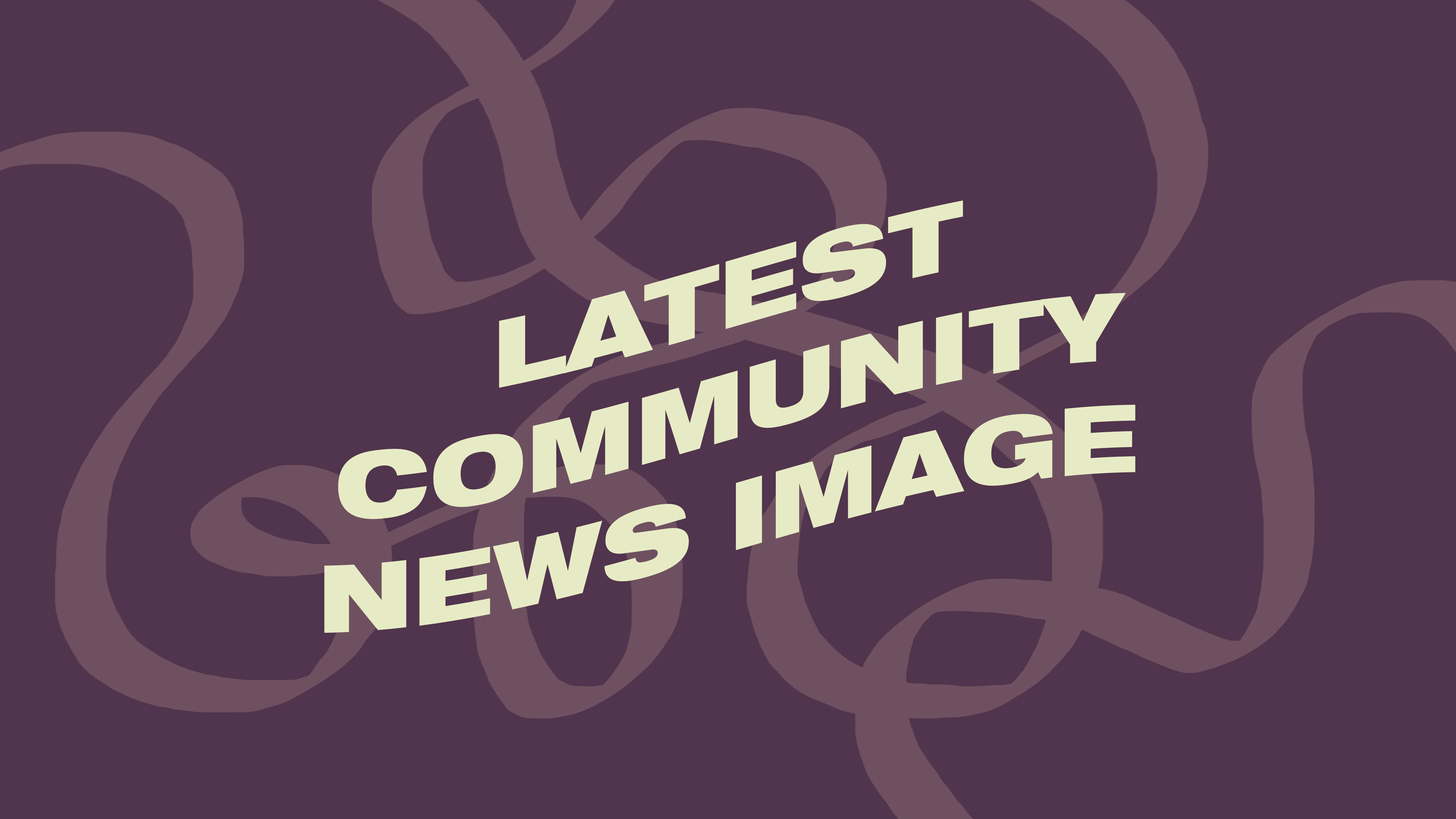
<style>
.page{position:relative;width:1456px;height:819px;background:#51344d}
.page>*{position:absolute;margin:0}
.t1{font:93.4px "HelveticaNeueLTStd-BlkEx";color:#e7ebc5}
</style>
<div class="page">
<p class="t1" style="left:324px;top:200px;width:812px;height:433px;text-align:center">LATEST<br>COMMUNITY<br>NEWS IMAGE</p>
</div>
